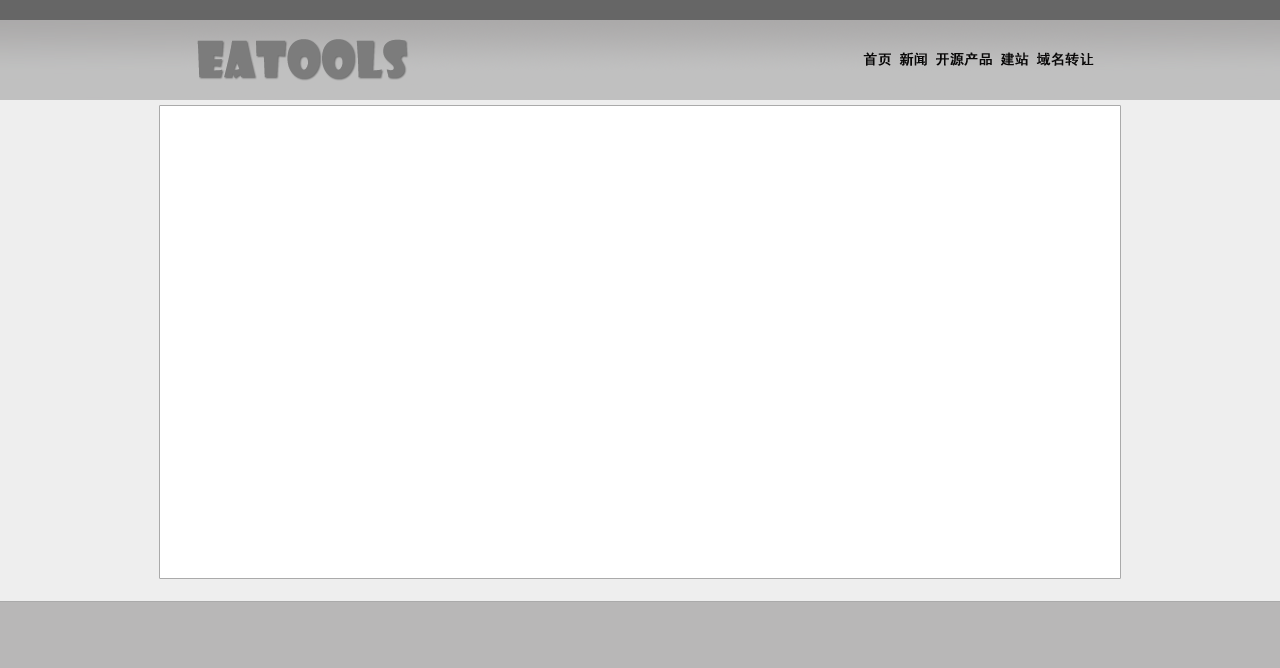
<style>
.page{position:relative;width:1280px;height:668px;background:#ffffff}
.page>*{position:absolute;margin:0}
.t1{font:48px "ShowcardGothic-Reg";color:#7c7c7c;font-weight:bold}
.t2{font:14px "SimHei";color:#090808;font-weight:bold}
</style>
<div class="page">
<p class="t1" style="left:197px;top:39px;width:210px;height:40px">EATOOLS</p>
<p class="t2" style="left:863px;top:52px;width:231px;height:14px">首页 新闻 开源产品 建站 域名转让</p>
</div>
